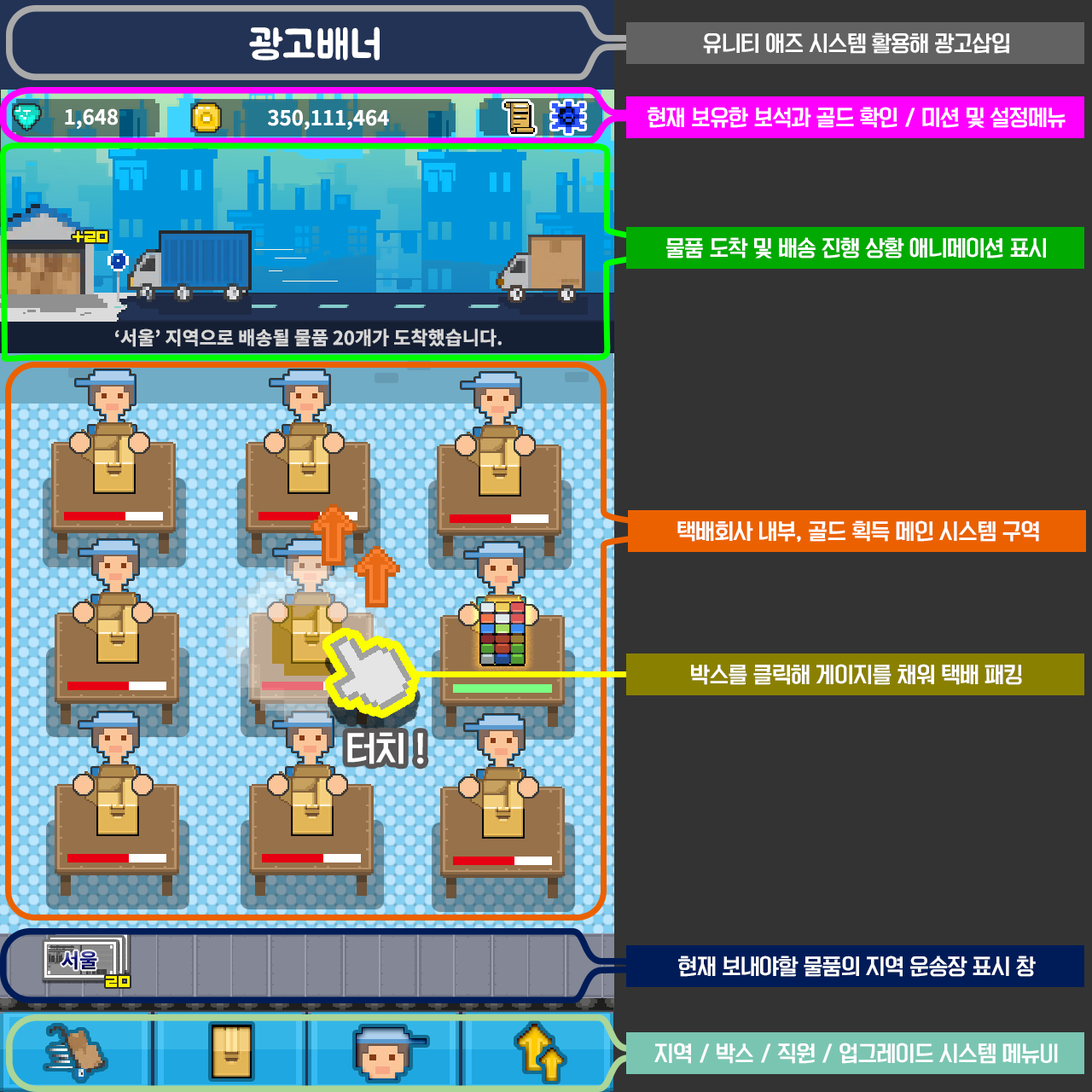
<style>
.page{position:relative;width:1092px;height:1092px;background:#333333}
.page>*{position:absolute;margin:0}
.t1{font:20.5px "KoreanYNSJG4-R";letter-spacing:-0.025em;color:#ffffff}
.t2{font:32.6px "KoreanYNSJG4-R";letter-spacing:-0.025em;color:#ffffff}
</style>
<div class="page">
<p class="t1" style="left:703px;top:32px;width:306px;height:22px">유니티 애즈 시스템 활용해 광고삽입</p>
<p class="t1" style="left:648px;top:107px;width:418px;height:21px">현재 보유한 보석과 골드 확인 / 미션 및 설정메뉴</p>
<p class="t1" style="left:666px;top:237px;width:380px;height:21px">물품 도착 및 배송 진행 상황 애니메이션 표시</p>
<p class="t1" style="left:677px;top:520px;width:362px;height:23px">택배회사 내부, 골드 획득 메인 시스템 구역</p>
<p class="t1" style="left:691px;top:664px;width:331px;height:21px">박스를 클릭해 게이지를 채워 택배 패킹</p>
<p class="t2" style="left:347px;top:732px;width:77px;height:32px">터치 !</p>
<p class="t1" style="left:678px;top:955px;width:358px;height:22px">현재 보내야할 물품의 지역 운송장 표시 창</p>
<p class="t1" style="left:654px;top:1043px;width:404px;height:21px">지역 / 박스 / 직원 / 업그레이드 시스템 메뉴UI</p>
</div>
